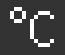
<style>
.page{position:relative;width:65px;height:55px;background:#333333}
.page>*{position:absolute;margin:0}
.t1{font:48px "Cubic_11";color:#ffffff}
</style>
<div class="page">
<p class="t1" style="left:10px;top:7px;width:44px;height:40px">°C</p>
</div>
